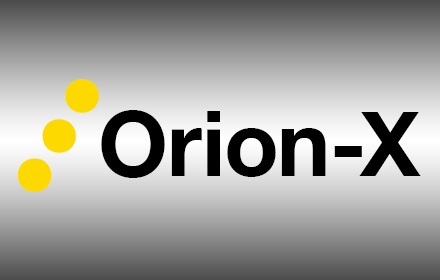
<style>
.page{position:relative;width:440px;height:280px}
.page>*{position:absolute;margin:0}
.t1{font:90px "HelveticaNeue-Bold";color:#000000}
</style>
<div class="page">
<p class="t1" style="left:101px;top:110px;width:320px;height:68px">Orion-X</p>
</div>
